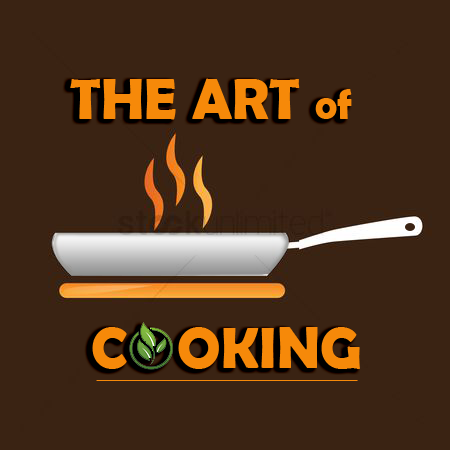
<style>
.page{position:relative;width:450px;height:450px;background:#3a2313}
.page>*{position:absolute;margin:0}
.t1{font:58.3px "BerlinSansFBDemi-Bold";color:#f68909}
.t2{font:41.6px "BerlinSansFBDemi-Bold";color:#f68909}
</style>
<div class="page">
<p class="t1" style="left:70px;top:78px;width:282px;height:42px">THE ART <span class="t2">of</span></p>
<p class="t1" style="left:92px;top:327px;width:268px;height:42px">C    OKING</p>
</div>
